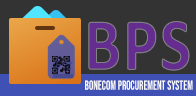
<style>
.page{position:relative;width:196px;height:96px;background:#333333}
.page>*{position:absolute;margin:0}
.t1{font:75.4px "Calibri-Bold";color:#662d91;font-weight:bold;scale:0.88 1}
.t2{font:13.5px "BebasNeue-Regular";color:#fdfcfd;scale:0.8 1}
</style>
<div class="page">
<p class="t1" style="left:88px;top:21px;width:102px;height:50px">BPS</p>
<p class="t2" style="left:85px;top:80px;width:108px;height:10px">BONECOM PROCUREMENT SYSTEM</p>
</div>
